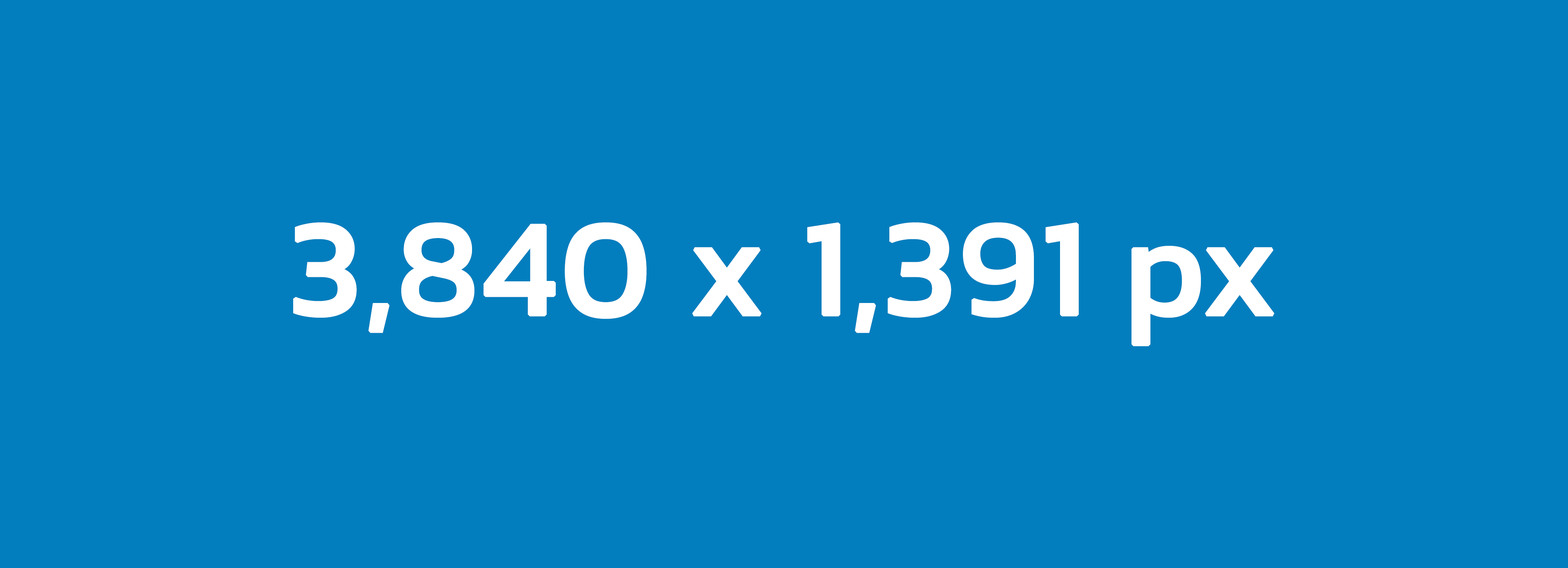
<style>
.page{position:relative;width:1568px;height:568px;background:#027ebe}
.page>*{position:absolute;margin:0}
.t1{font:137.8px "Kanit-Regular";color:#ffffff;font-weight:bold}
</style>
<div class="page">
<p class="t1" style="left:293px;top:222px;width:981px;height:124px">3,840 x 1,391 px</p>
</div>
